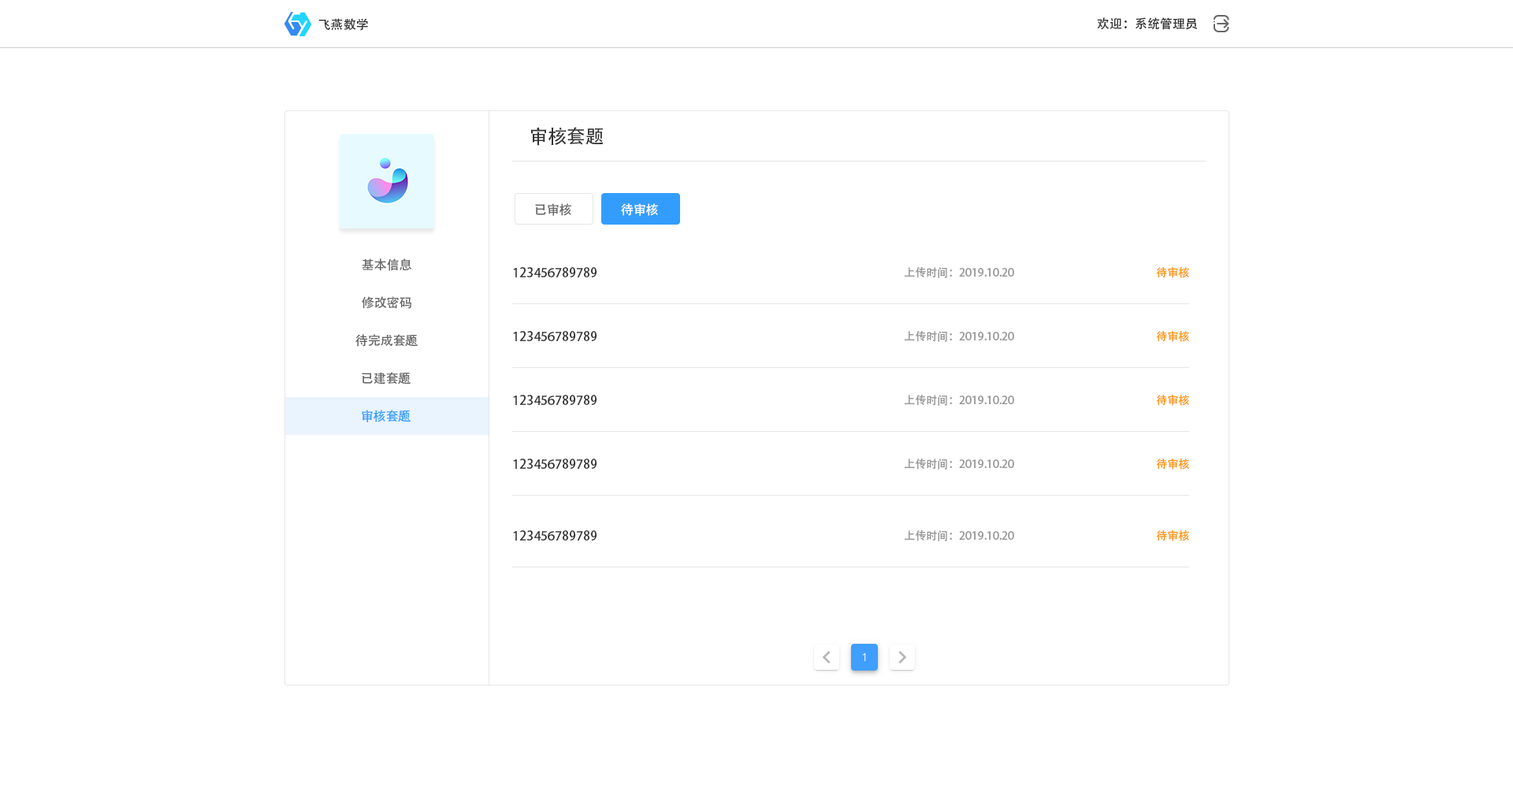
<style>
.page{position:relative;width:1513px;height:788px;background:#ffffff}
.page>*{position:absolute;margin:0}
.t1{font:12.6px "AdobeHeitiStd-Regular";color:#333333}
.t2{font:18.9px "AdobeHeitiStd-Regular";color:#333333}
.t3{font:12.6px "AdobeHeitiStd-Regular";color:#666666}
.t4{font:12.6px "AdobeHeitiStd-Regular";color:#ffffff}
.t5{font:11px "AdobeHeitiStd-Regular";color:#999999}
.t6{font:11px "AdobeHeitiStd-Regular";color:#ff9814}
.t7{font:12.6px "AdobeHeitiStd-Regular";color:#339dff}
</style>
<div class="page">
<p class="t1" style="left:1097px;top:17px;width:101px;height:13px">欢迎：系统管理员</p>
<p class="t1" style="left:318px;top:18px;width:50px;height:13px">飞燕数学</p>
<p class="t2" style="left:531px;top:127px;width:73px;height:19px">审核套题</p>
<p class="t3" style="left:535px;top:203px;width:36px;height:13px">已审核</p>
<p class="t4" style="left:621px;top:203px;width:37px;height:13px">待审核</p>
<p class="t3" style="left:362px;top:258px;width:50px;height:13px">基本信息</p>
<p class="t1" style="left:513px;top:267px;width:84px;height:10px">123456789789</p>
<p class="t5" style="left:905px;top:267px;width:109px;height:11px">上传时间：2019.10.20</p>
<p class="t6" style="left:1156px;top:267px;width:33px;height:11px">待审核</p>
<p class="t3" style="left:362px;top:296px;width:49px;height:13px">修改密码</p>
<p class="t3" style="left:355px;top:334px;width:63px;height:13px">待完成套题</p>
<p class="t1" style="left:513px;top:331px;width:84px;height:10px">123456789789</p>
<p class="t5" style="left:905px;top:331px;width:109px;height:11px">上传时间：2019.10.20</p>
<p class="t6" style="left:1156px;top:331px;width:33px;height:11px">待审核</p>
<p class="t3" style="left:362px;top:372px;width:49px;height:13px">已建套题</p>
<p class="t1" style="left:513px;top:395px;width:84px;height:10px">123456789789</p>
<p class="t5" style="left:905px;top:395px;width:109px;height:11px">上传时间：2019.10.20</p>
<p class="t6" style="left:1156px;top:395px;width:33px;height:11px">待审核</p>
<p class="t7" style="left:362px;top:410px;width:49px;height:12px">审核套题</p>
<p class="t1" style="left:513px;top:459px;width:84px;height:10px">123456789789</p>
<p class="t5" style="left:905px;top:459px;width:109px;height:11px">上传时间：2019.10.20</p>
<p class="t6" style="left:1156px;top:459px;width:33px;height:11px">待审核</p>
<p class="t1" style="left:513px;top:530px;width:84px;height:11px">123456789789</p>
<p class="t5" style="left:905px;top:530px;width:109px;height:11px">上传时间：2019.10.20</p>
<p class="t6" style="left:1156px;top:530px;width:33px;height:11px">待审核</p>
</div>
